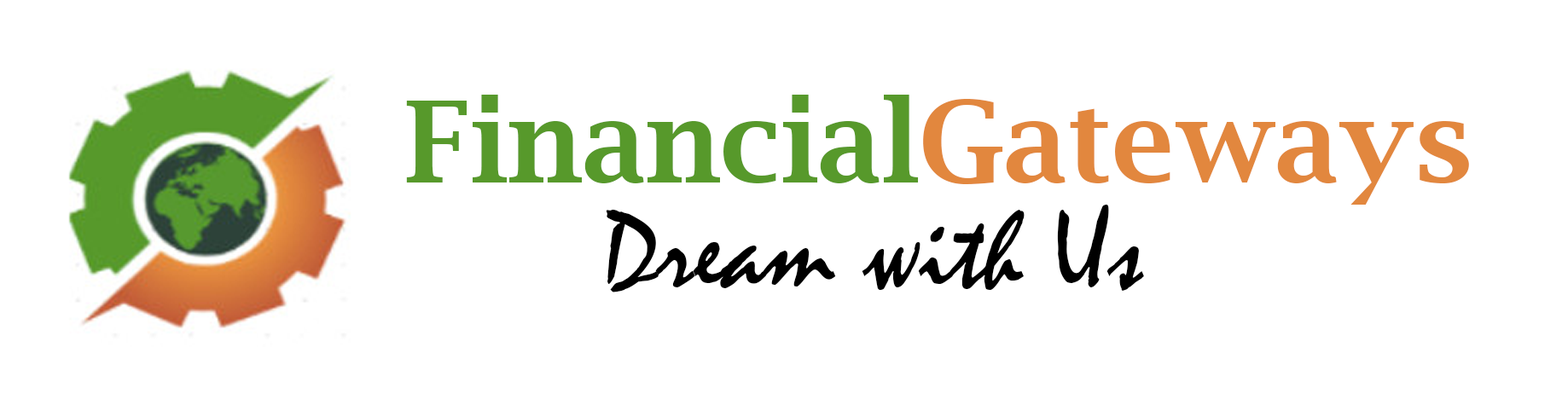
<style>
.page{position:relative;width:1568px;height:405px;background:#ffffff}
.page>*{position:absolute;margin:0}
.t1{font:113.7px "LucidaBright-Demi";color:#57992b}
.t2{font:113.7px "LucidaBright-Demi";color:#e2873e}
.t3{font:113.7px "Mistral";color:#000000}
</style>
<div class="page">
<p class="t1" style="left:406px;top:95px;width:1063px;height:110px">Financial<span class="t2">Gateways</span></p>
<p class="t3" style="left:606px;top:205px;width:538px;height:88px">Dream with Us</p>
</div>
